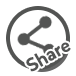
<style>
.page{position:relative;width:76px;height:76px;background:#ffffff}
.page>*{position:absolute;margin:0}
.t1{font:18.8px "MikadoMedium";color:#535453}
</style>
<div class="page">
<p class="t1" style="left:26px;top:42px;width:45px;height:30px;rotate:-30deg">Share</p>
</div>
